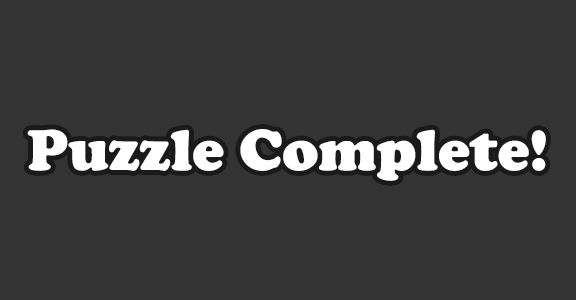
<style>
.page{position:relative;width:576px;height:300px;background:#333333}
.page>*{position:absolute;margin:0}
.t1{font:60px "CooperBlack";color:#ffffff}
</style>
<div class="page">
<p class="t1" style="left:27px;top:129px;width:519px;height:52px">Puzzle Complete!</p>
</div>
